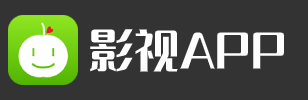
<style>
.page{position:relative;width:308px;height:100px;background:#333333}
.page>*{position:absolute;margin:0}
.t1{font:45px "HuXiaoBo-NanShen";color:#fefefe}
</style>
<div class="page">
<p class="t1" style="left:90px;top:29px;width:195px;height:43px">影视APP</p>
</div>
